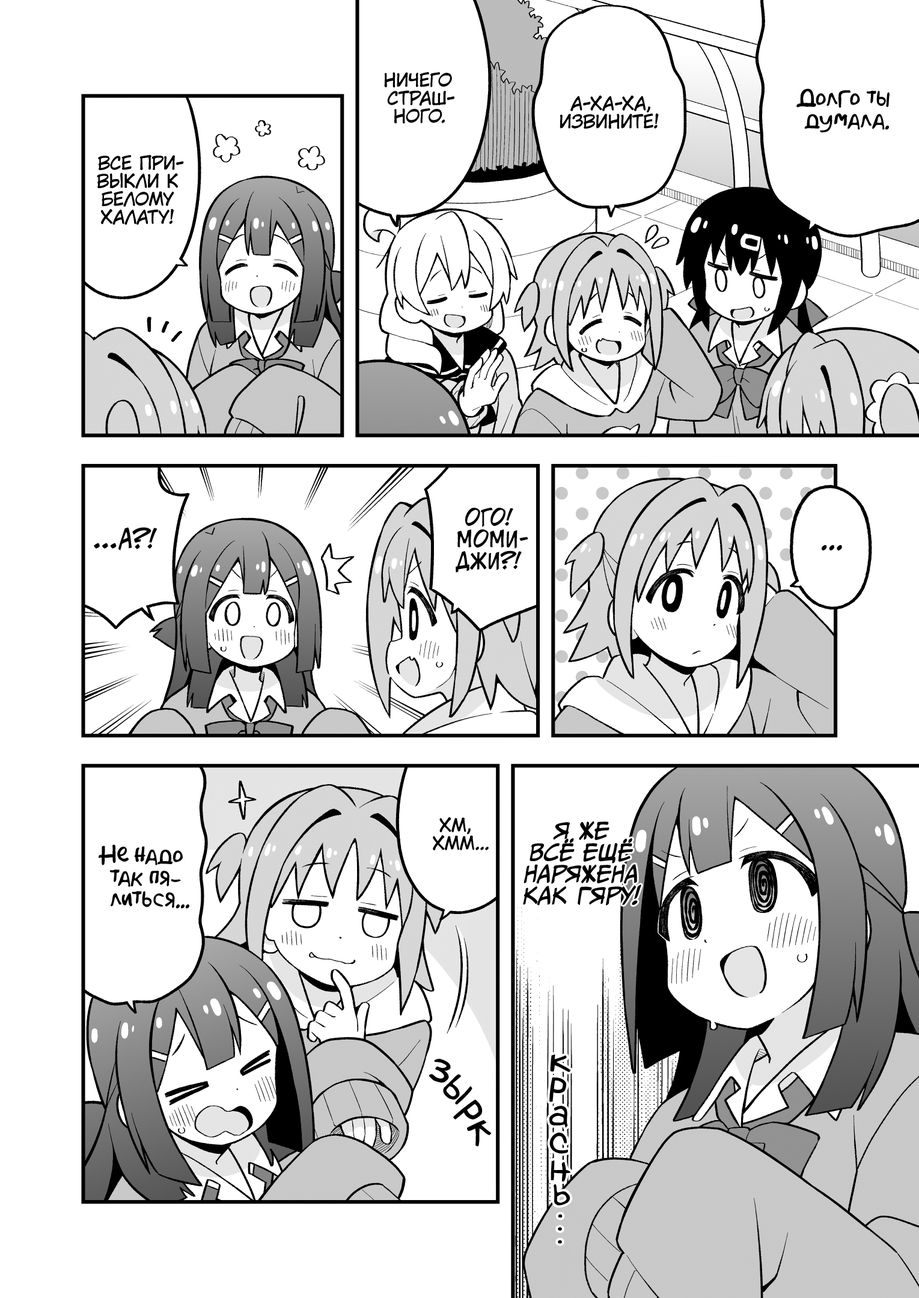
<style>
.page{position:relative;width:919px;height:1298px;background:#ffffff}
.page>*{position:absolute;margin:0}
.t1{font:18px "KuraiVoice2";color:#000000;text-transform:uppercase}
.t2{font:21.6px "AkbarPlain";color:#000000}
.t3{font:21.6px "v_CCJeffCampbell";color:#000000;text-transform:uppercase}
.t4{font:25.2px "v_CCJeffCampbell";color:#000000;text-transform:uppercase}
.t5{font:28.8px "KuraiVoice2";color:#000000;text-transform:uppercase}
.t6{font:21.6px "CCMeanwhile";color:#000000;text-transform:uppercase;font-style:italic}
.t7{font:46.9px "v_Augie";color:#000000;scale:0.9 1}
.t8{font:39.7px "v_Augie";color:#000000}
.t9{font:32.4px "v_Augie";color:#000000}
</style>
<div class="page">
<p class="t1" style="left:384px;top:72px;width:70px;height:52px;text-align:center">Ничего<br>страш-<br>ного.</p>
<p class="t2" style="left:796px;top:88px;width:93px;height:45px;text-align:center">Долго ты<br>думала.</p>
<p class="t1" style="left:559px;top:96px;width:100px;height:33px;text-align:center">А-ха-ха,<br>извините!</p>
<p class="t1" style="left:97px;top:154px;width:87px;height:71px;text-align:center">Все при-<br>выкли к<br>белому<br>халату!</p>
<p class="t3" style="left:455px;top:508px;width:73px;height:65px;text-align:center">Ого!<br>Моми-<br>джи?!</p>
<p class="t4" style="left:94px;top:527px;width:63px;height:23px">...А?!</p>
<p class="t5" style="left:821px;top:545px;width:21px;height:5px">...</p>
<p class="t1" style="left:433px;top:817px;width:56px;height:33px;text-align:center">Хм,<br>хмм...</p>
<p class="t6" style="left:523px;top:821px;width:118px;height:85px;text-align:center">Я же<br>всё ещё<br>наряжена<br>как гяру!</p>
<p class="t2" style="left:99px;top:844px;width:90px;height:65px;text-align:center">Не надо<br>так пя-<br>литься...</p>
<p class="t7" style="left:428px;top:1059px;width:23px;height:24px;rotate:22deg">з</p>
<p class="t8" style="left:550px;top:1054px;width:20px;height:18px;rotate:3deg">к</p>
<p class="t7" style="left:443px;top:1074px;width:29px;height:30px;rotate:43deg">ы</p>
<p class="t8" style="left:549px;top:1077px;width:17px;height:25px;rotate:12deg">р</p>
<p class="t7" style="left:453px;top:1099px;width:30px;height:20px;rotate:56deg">р</p>
<p class="t8" style="left:549px;top:1106px;width:19px;height:22px;rotate:11deg">а</p>
<p class="t7" style="left:467px;top:1120px;width:25px;height:26px;rotate:64deg">к</p>
<p class="t8" style="left:549px;top:1132px;width:19px;height:22px">с</p>
<p class="t8" style="left:550px;top:1160px;width:20px;height:21px;rotate:3deg">н</p>
<p class="t8" style="left:553px;top:1184px;width:17px;height:21px;rotate:-4deg">ь</p>
<p class="t9" style="left:558px;top:1214px;width:4px;height:4px">.</p>
<p class="t9" style="left:558px;top:1227px;width:4px;height:4px">.</p>
<p class="t9" style="left:558px;top:1240px;width:4px;height:4px">.</p>
</div>
